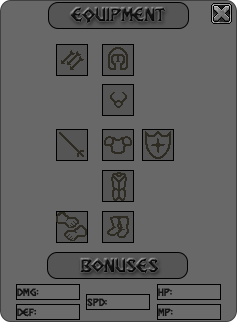
<style>
.page{position:relative;width:237px;height:322px;background:#686868}
.page>*{position:absolute;margin:0}
.t1{font:22px "DragonSlapper";color:#131313}
.t2{font:12px "DragonSlapper";color:#131313}
</style>
<div class="page">
<p class="t1" style="left:70px;top:7px;width:96px;height:17px">equipment</p>
<p class="t1" style="left:80px;top:258px;width:78px;height:16px">bonuses</p>
<p class="t2" style="left:17px;top:288px;width:22px;height:9px">dmg:</p>
<p class="t2" style="left:158px;top:288px;width:14px;height:9px">hp:</p>
<p class="t2" style="left:87px;top:298px;width:20px;height:9px">spd:</p>
<p class="t2" style="left:17px;top:308px;width:20px;height:9px">def:</p>
<p class="t2" style="left:158px;top:308px;width:15px;height:9px">mp:</p>
</div>
